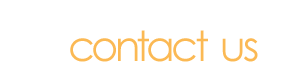
<style>
.page{position:relative;width:300px;height:80px;background:#ffffff}
.page>*{position:absolute;margin:0}
.t1{font:41.7px "CenturyGothic";color:#fbb954}
</style>
<div class="page">
<p class="t1" style="left:70px;top:30px;width:188px;height:32px">contact us</p>
</div>
